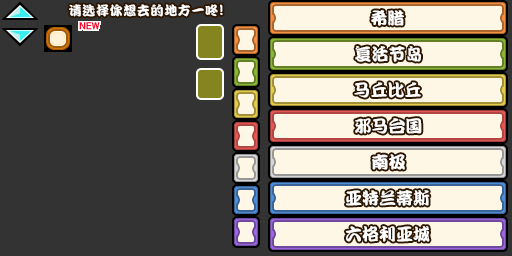
<style>
.page{position:relative;width:512px;height:256px;background:#333333}
.page>*{position:absolute;margin:0}
.t1{font:13px "DFPKanTingLiuW9";letter-spacing:0.05em;color:#ffffff}
.t2{font:15px "DFPKanTingLiuW9";letter-spacing:0.05em;color:#ffffff}
.t3{font:17px "DFPKanTingLiuW9";color:#ffffff}
</style>
<div class="page">
<p class="t1" style="left:69px;top:4px;width:154px;height:13px">请选择你想去的地方一咚<span class="t2">!</span></p>
<p class="t3" style="left:371px;top:10px;width:33px;height:16px">希腊</p>
<p class="t3" style="left:355px;top:46px;width:66px;height:16px">复活节岛</p>
<p class="t3" style="left:354px;top:82px;width:67px;height:16px">马丘比丘</p>
<p class="t3" style="left:355px;top:118px;width:67px;height:16px">邪马台国</p>
<p class="t3" style="left:372px;top:154px;width:33px;height:16px">南极</p>
<p class="t3" style="left:346px;top:190px;width:84px;height:16px">亚特兰蒂斯</p>
<p class="t3" style="left:345px;top:226px;width:85px;height:16px">六格利亚城</p>
</div>
